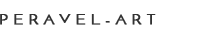
<style>
.page{position:relative;width:220px;height:35px;background:#ffffff}
.page>*{position:absolute;margin:0}
.t1{font:14px "JosefinSans";color:#333333;text-transform:uppercase;font-weight:bold;scale:1.2 1}
</style>
<div class="page">
<p class="t1" style="left:0px;top:14px;width:156px;height:11px">P E R A V E L - A R T</p>
</div>
